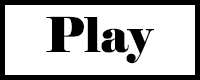
<style>
.page{position:relative;width:200px;height:80px;background:#ffffff}
.page>*{position:absolute;margin:0}
.t1{font:48px "Elephant-Regular";color:#000000}
</style>
<div class="page">
<p class="t1" style="left:46px;top:16px;width:108px;height:48px">Play</p>
</div>
